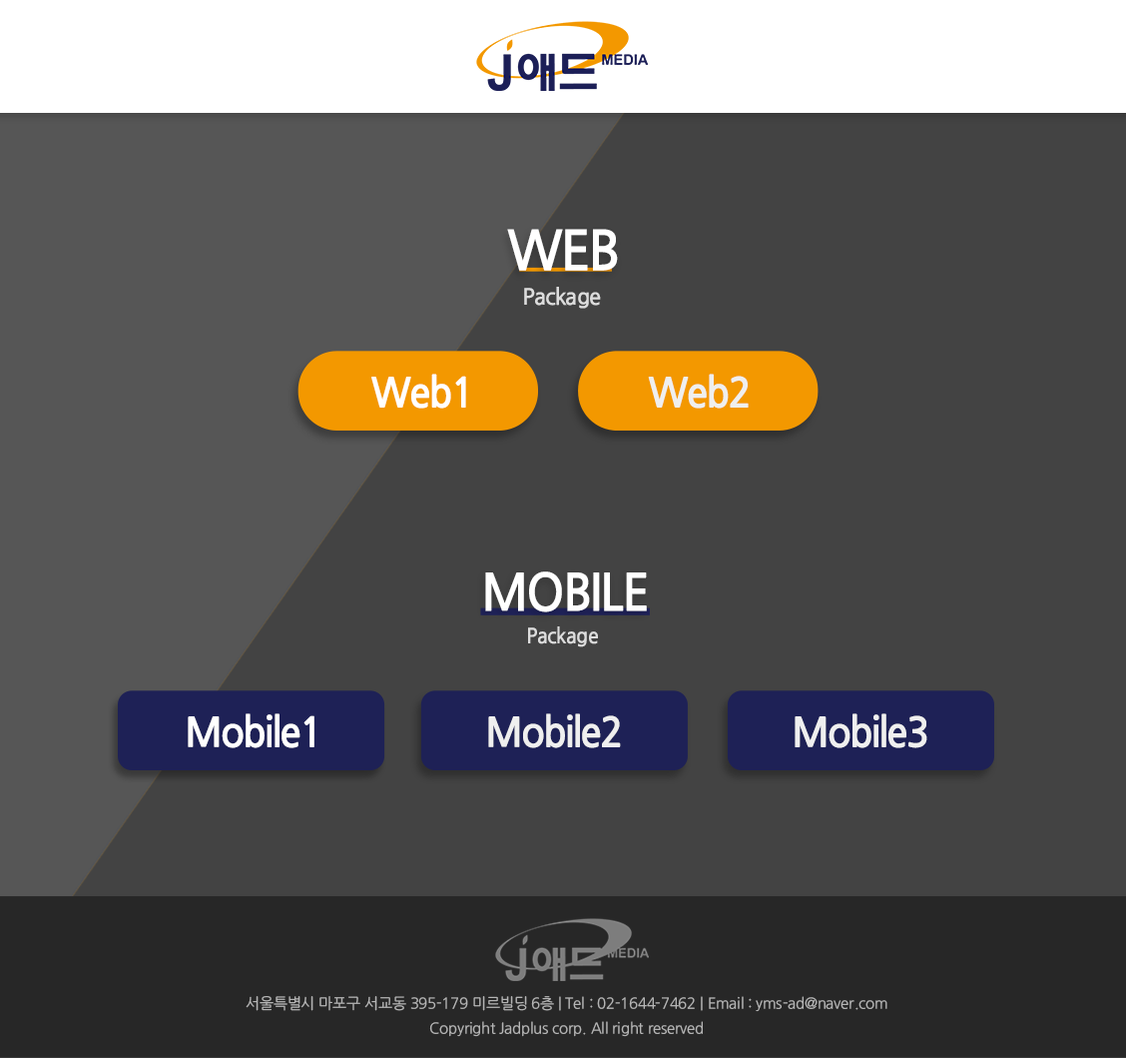
<style>
.page{position:relative;width:1126px;height:1059px;background:#434343}
.page>*{position:absolute;margin:0}
.t1{font:54.7px "NanumGothicOTFBold";letter-spacing:-0.065em;color:#ffffff}
.t2{font:22.4px "NanumGothicOTFBold";letter-spacing:-0.045em;color:#dddddd}
.t3{font:40.7px "NanumGothicOTFBold";letter-spacing:-0.045em;color:#ffffff;scale:0.96 1}
.t4{font:40.7px "NanumGothicOTFBold";letter-spacing:-0.045em;color:#efefef;scale:0.96 1}
.t5{font:51.1px "NanumGothicOTFBold";letter-spacing:-0.045em;color:#ffffff;scale:0.96 1}
.t6{font:21px "NanumGothicOTFBold";letter-spacing:-0.03em;color:#dddddd;scale:0.95 1}
.t7{font:15px/25px "NanumGothicOTF";letter-spacing:-0.015em;color:#b4b4b4}
</style>
<div class="page">
<p class="t1" style="left:507px;top:229px;width:111px;height:42px">WEB</p>
<p class="t2" style="left:524px;top:287px;width:77px;height:22px">Package</p>
<p class="t3" style="left:371px;top:373px;width:95px;height:35px">Web1</p>
<p class="t4" style="left:648px;top:373px;width:101px;height:35px">Web2</p>
<p class="t5" style="left:485px;top:571px;width:162px;height:41px">MOBILE</p>
<p class="t6" style="left:528px;top:626px;width:70px;height:21px">Package</p>
<p class="t3" style="left:188px;top:713px;width:127px;height:35px">Mobile1</p>
<p class="t4" style="left:488px;top:713px;width:133px;height:35px">Mobile2</p>
<p class="t4" style="left:795px;top:713px;width:133px;height:35px">Mobile3</p>
<p class="t7" style="left:246px;top:996px;width:642px;height:41px;text-align:center">서울특별시 마포구 서교동 395-179 미르빌딩 6층 | Tel : 02-1644-7462 | Email : yms-ad@naver.com<br>Copyright Jadplus corp. All right reserved</p>
</div>
